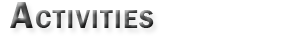
<style>
.page{position:relative;width:300px;height:45px;background:#ffffff}
.page>*{position:absolute;margin:0}
.t1{font:26px "FranklinGothic-Demi";letter-spacing:0.05em}
.t2{font:38px "FranklinGothic-Demi";letter-spacing:0.05em}
</style>
<div class="page">
<p class="t1" style="left:10px;top:2px;width:144px;height:26px"><span class="t2">A</span>CTIVITIES</p>
</div>
